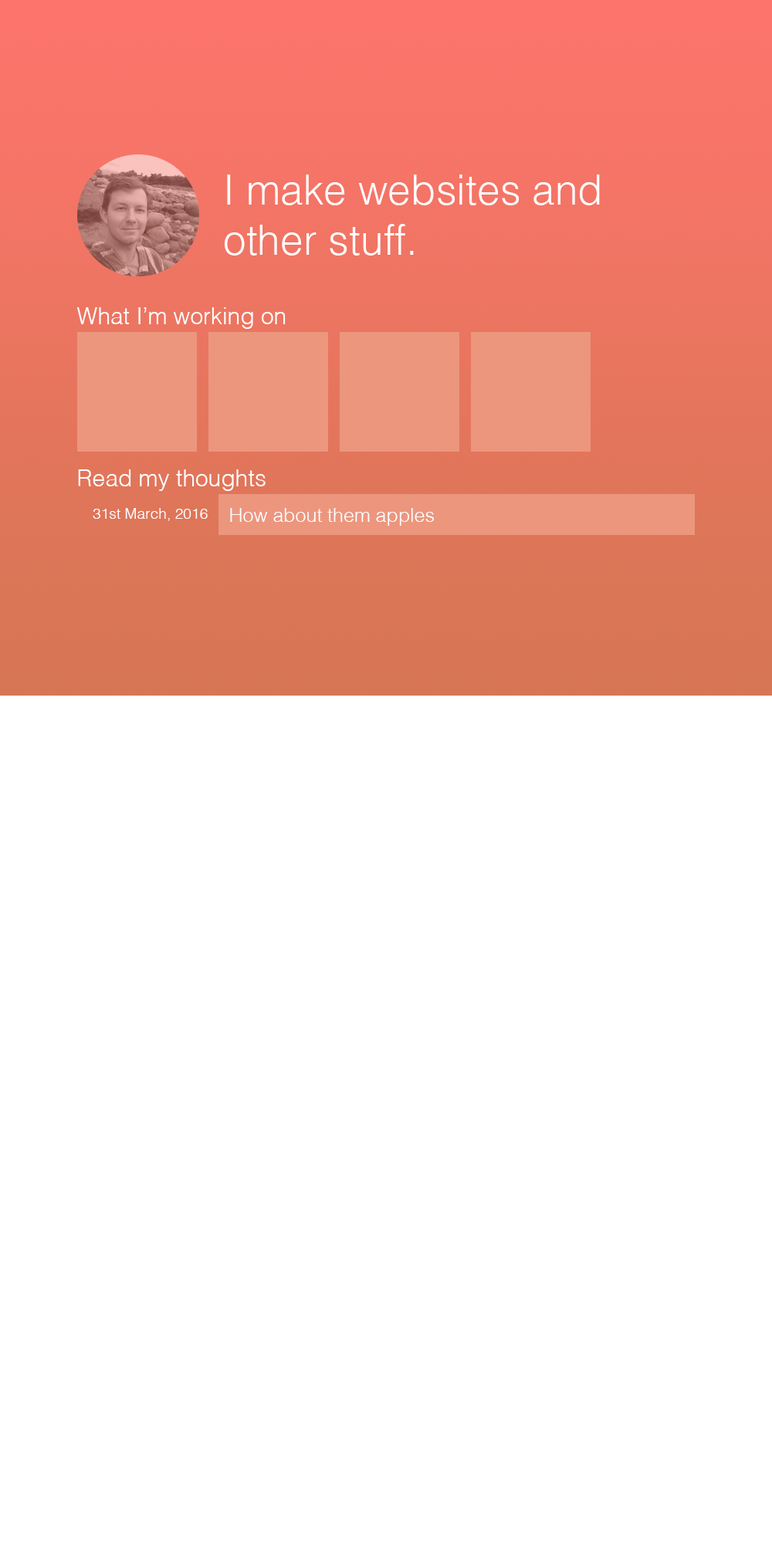
<style>
.page{position:relative;width:772px;height:1544px;background:#ffffff}
.page>*{position:absolute;margin:0}
.t1{font:41.4px "Helvetica-Light";color:#ffffff}
.t2{font:23.2px "Helvetica-Light";color:#ffffff}
.t3{font:14.6px "Helvetica-Light";color:#ffffff}
.t4{font:19.3px "Helvetica-Light";color:#ffffff}
</style>
<div class="page">
<p class="t1" style="left:225px;top:175px;width:375px;height:81px">I make websites and<br>other stuff.</p>
<p class="t2" style="left:76px;top:307px;width:210px;height:22px">What I’m working on</p>
<p class="t2" style="left:78px;top:469px;width:188px;height:22px">Read my thoughts</p>
<p class="t3" style="left:93px;top:508px;width:115px;height:13px">31st March, 2016</p>
<p class="t4" style="left:230px;top:508px;width:204px;height:18px">How about them apples</p>
</div>
